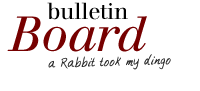
<style>
.page{position:relative;width:200px;height:91px;background:#ffffff}
.page>*{position:absolute;margin:0}
.t1{font:23px "WalbaumBook-Regular";letter-spacing:-0.01em;color:#000000}
.t2{font:49px "WalbaumBook-Italic";letter-spacing:-0.01em;color:#760000}
.t3{font:16px "BrandysHand-Plain";color:#2b2b2b}
</style>
<div class="page">
<p class="t1" style="left:47px;top:2px;width:81px;height:18px">bulletin</p>
<p class="t2" style="left:7px;top:16px;width:140px;height:36px">Board</p>
<p class="t3" style="left:48px;top:54px;width:123px;height:16px;rotate:-2deg">a Rabbit took my dingo</p>
</div>
